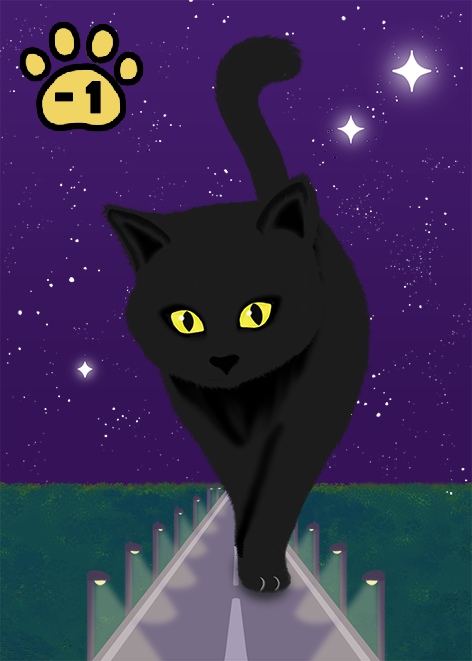
<style>
.page{position:relative;width:472px;height:661px}
.page>*{position:absolute;margin:0}
.t1{font:49.4px "Filicudi-Solid";letter-spacing:0.13em;color:#010101;font-weight:bold;scale:1.1 1}
</style>
<div class="page">
<p class="t1" style="left:55px;top:81px;width:46px;height:33px">-1</p>
</div>
